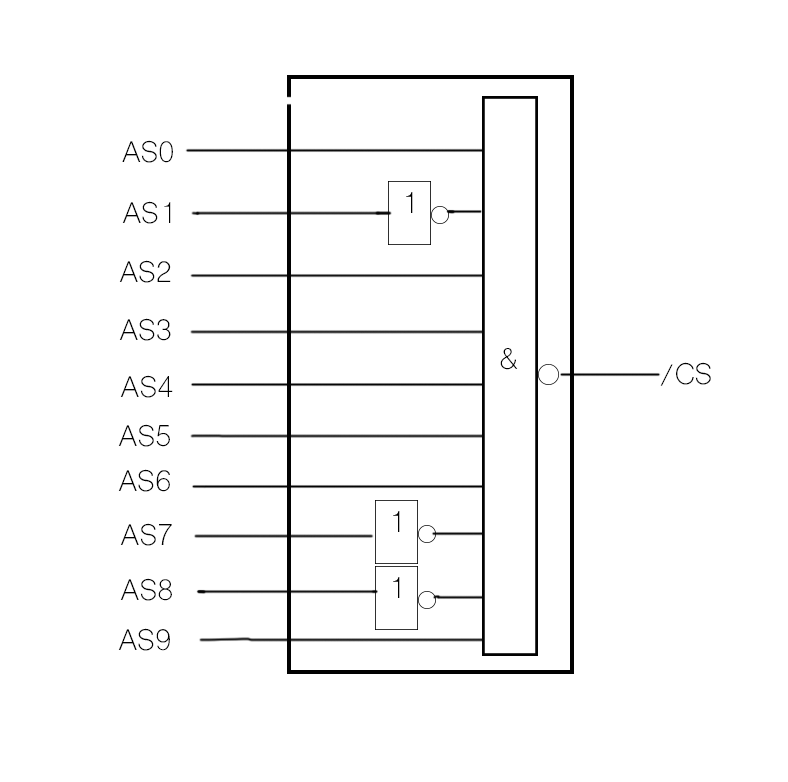
<style>
.page{position:relative;width:788px;height:782px;background:#ffffff}
.page>*{position:absolute;margin:0}
.t1{font:28px "ShreeDev0714";letter-spacing:0.02em;color:#000000}
</style>
<div class="page">
<p class="t1" style="left:122px;top:140px;width:51px;height:23px">AS0</p>
<p class="t1" style="left:122px;top:201px;width:49px;height:23px">AS1</p>
<p class="t1" style="left:119px;top:260px;width:52px;height:23px">AS2</p>
<p class="t1" style="left:119px;top:318px;width:52px;height:23px">AS3</p>
<p class="t1" style="left:500px;top:348px;width:18px;height:22px">&amp;</p>
<p class="t1" style="left:660px;top:362px;width:51px;height:24px">/CS</p>
<p class="t1" style="left:120px;top:375px;width:53px;height:23px">AS4</p>
<p class="t1" style="left:118px;top:424px;width:52px;height:23px">AS5</p>
<p class="t1" style="left:118px;top:469px;width:52px;height:23px">AS6</p>
<p class="t1" style="left:120px;top:523px;width:52px;height:23px">AS7</p>
<p class="t1" style="left:120px;top:578px;width:52px;height:23px">AS8</p>
<p class="t1" style="left:118px;top:628px;width:52px;height:23px">AS9</p>
</div>
